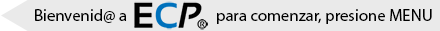
<style>
.page{position:relative;width:440px;height:31px;background:#eaeaea}
.page>*{position:absolute;margin:0}
.t1{font:16.7px "MyriadPro-Regular";color:#000000}
</style>
<div class="page">
<p class="t1" style="left:35px;top:9px;width:92px;height:14px">Bienvenid@ a</p>
<p class="t1" style="left:217px;top:9px;width:215px;height:15px">para comenzar, presione MENU</p>
</div>
